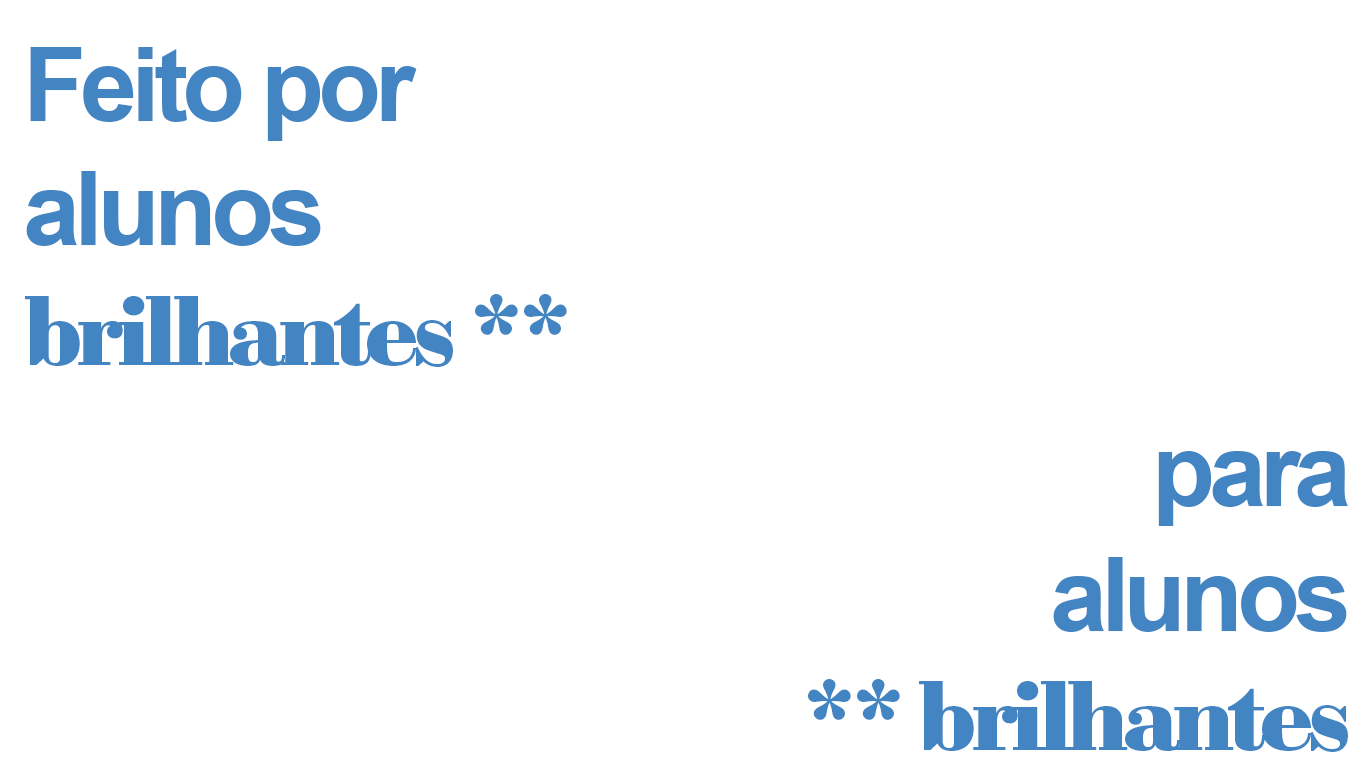
<style>
.page{position:relative;width:1366px;height:768px;background:#ffffff}
.page>*{position:absolute;margin:0}
.t1{font:103.4px "Arial-BoldMT";letter-spacing:-0.06em;color:#4385c3}
.t2{font:100px "SybariteSmall";letter-spacing:-0.06em;color:#4385c3}
</style>
<div class="page">
<p class="t1" style="left:25px;top:47px;width:542px;height:320px">Feito por<br>alunos<br><span class="t2">brilhantes **</span></p>
<p class="t2" style="left:808px;top:451px;width:540px;height:301px;text-align:right"><span class="t1">para<br>alunos<br></span>** brilhantes</p>
</div>
